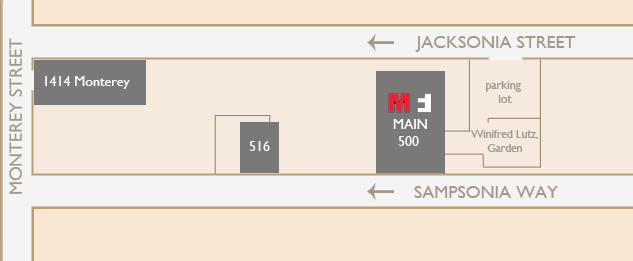
<style>
.page{position:relative;width:633px;height:261px;background:#f6e9dd}
.page>*{position:absolute;margin:0}
.t1{font:18px "GillSansMT";color:#a4988a}
.t2{font:14px "GillSansMT";color:#ffffff}
.t3{font:12px "GillSansMT";color:#9e9992}
.t4{font:11.5px "GillSansMT";color:#9e9992}
</style>
<div class="page">
<p class="t1" style="left:9px;top:38px;width:13px;height:156px;rotate:-90deg">MONTEREY STREET</p>
<p class="t1" style="left:415px;top:36px;width:161px;height:16px">JACKSONIA STREET</p>
<p class="t2" style="left:45px;top:76px;width:85px;height:13px">1414 Monterey</p>
<p class="t3" style="left:486px;top:81px;width:35px;height:22px;text-align:center">parking <br>lot</p>
<p class="t2" style="left:393px;top:119px;width:34px;height:27px;text-align:center">MAIN<br>500</p>
<p class="t4" style="left:471px;top:130px;width:68px;height:22px;text-align:center">Winifred Lutz,<br>Garden</p>
<p class="t2" style="left:249px;top:141px;width:21px;height:10px">516</p>
<p class="t1" style="left:414px;top:186px;width:144px;height:12px">SAMPSONIA WAY</p>
</div>
